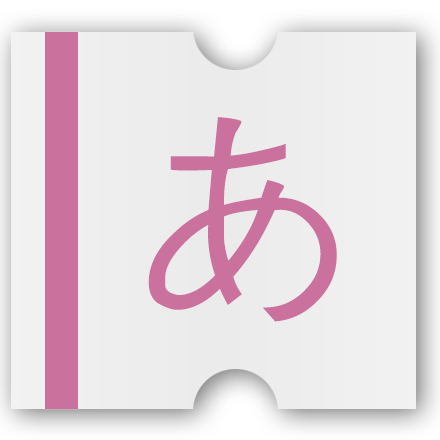
<style>
.page{position:relative;width:440px;height:440px}
.page>*{position:absolute;margin:0}
.t1{font:220px "WenQuanYiZenHei";color:#ca729d}
</style>
<div class="page">
<p class="t1" style="left:148px;top:117px;width:189px;height:205px">あ</p>
</div>
